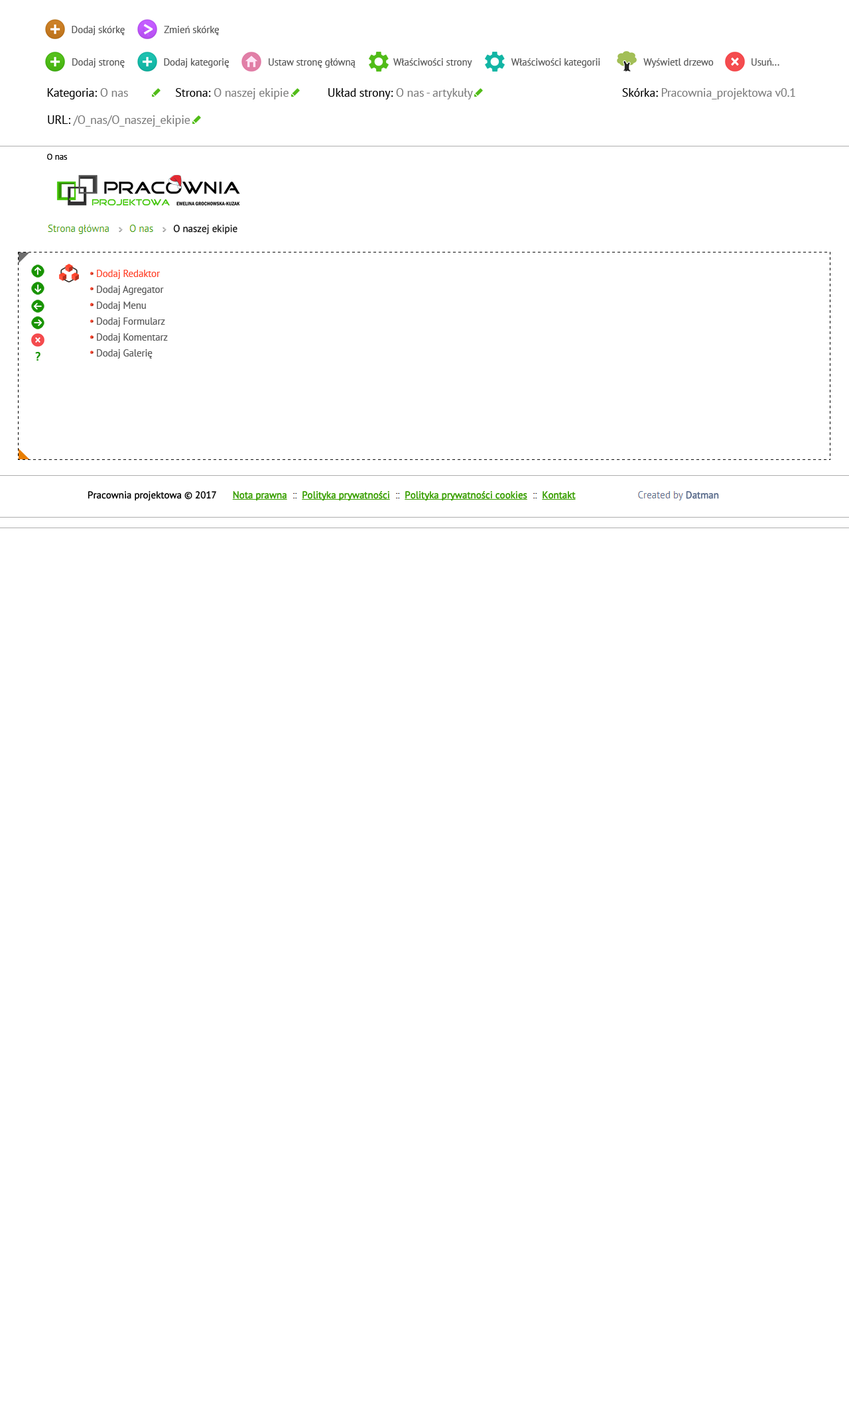
<style>
.page{position:relative;width:849px;height:1405px;background:#ffffff}
.page>*{position:absolute;margin:0}
.t1{font:9.9px "PTSans-Regular";letter-spacing:-0.01em;color:#585858}
.t2{font:19.9px "PTSans-Bold";letter-spacing:-0.01em;color:#ffffff}
.t3{font:11.9px "PTSans-Regular";letter-spacing:-0.01em;color:#000000}
.t4{font:11.9px "PTSans-Regular";letter-spacing:-0.01em;color:#7a7a7a}
.t5{font:8.6px "PTSans-Regular";letter-spacing:-0.01em;color:#000000}
.t6{font:9.9px/15.9px "PTSans-Regular";letter-spacing:-0.01em;color:#585858}
.t7{font:9.9px/15.9px "PTSans-Regular";letter-spacing:-0.01em;color:#ff442c}
.t8{font:11.9px "PTSans-Bold";letter-spacing:-0.01em;color:#189300}
</style>
<div class="page">
<p class="t1" style="left:72px;top:26px;width:53px;height:9px">Dodaj skórkę</p>
<p class="t2" style="left:143px;top:24px;width:10px;height:10px">&gt;</p>
<p class="t1" style="left:164px;top:26px;width:55px;height:9px">Zmień skórkę</p>
<p class="t1" style="left:72px;top:58px;width:53px;height:10px">Dodaj stronę</p>
<p class="t1" style="left:164px;top:58px;width:65px;height:10px">Dodaj kategorię</p>
<p class="t1" style="left:268px;top:58px;width:87px;height:10px">Ustaw stronę główną</p>
<p class="t1" style="left:393px;top:58px;width:79px;height:10px">Właściwości strony</p>
<p class="t1" style="left:510px;top:58px;width:90px;height:10px">Właściwości kategorii</p>
<p class="t1" style="left:643px;top:58px;width:70px;height:10px">Wyświetl drzewo</p>
<p class="t1" style="left:751px;top:58px;width:28px;height:8px">Usuń...</p>
<p class="t3" style="left:47px;top:88px;width:81px;height:11px">Kategoria: <span class="t4">O nas</span></p>
<p class="t4" style="left:176px;top:88px;width:112px;height:11px"><span class="t3">Strona: </span>O naszej ekipie</p>
<p class="t4" style="left:328px;top:88px;width:145px;height:11px"><span class="t3">Układ strony: </span>O nas - artykuły</p>
<p class="t4" style="left:622px;top:88px;width:173px;height:11px"><span class="t3">Skórka: </span>Pracownia_projektowa v0.1</p>
<p class="t4" style="left:48px;top:115px;width:142px;height:12px"><span class="t3">URL: </span>/O_nas/O_naszej_ekipie</p>
<p class="t5" style="left:47px;top:154px;width:20px;height:6px">O nas</p>
<p class="t6" style="left:97px;top:270px;width:71px;height:89px"><span class="t7">Dodaj Redaktor<br></span>Dodaj Agregator<br>Dodaj Menu<br>Dodaj Formularz<br>Dodaj Komentarz<br>Dodaj Galerię</p>
<p class="t8" style="left:35px;top:352px;width:5px;height:9px">?</p>
</div>
